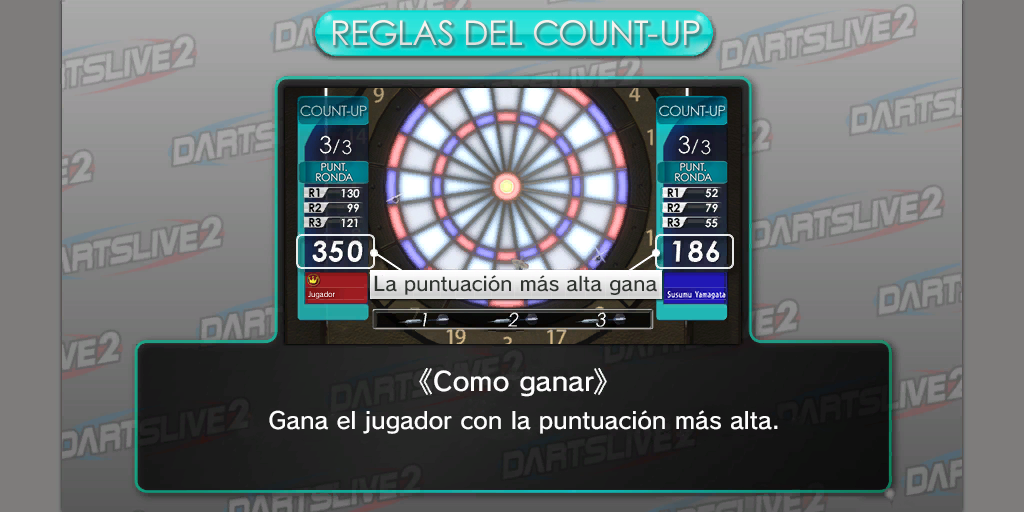
<style>
.page{position:relative;width:1024px;height:512px}
.page>*{position:absolute;margin:0}
.t1{font:34px "CenturyGothicPaneuropean";color:#eae9e6}
.t2{font:19.5px "SCEPS3RodinLATIN-Regular";color:#313531}
.t3{font:25.9px "SCEPS3RodinLATIN-Regular";color:#fdfdfd;scale:1.04 1}
.t4{font:23px "SCEPS3RodinLATIN-Regular";color:#fdfdfd}
</style>
<div class="page">
<p class="t1" style="left:333px;top:20px;width:367px;height:26px">REGLAS DEL COUNT-UP</p>
<p class="t2" style="left:374px;top:275px;width:283px;height:20px">La puntuación más alta gana</p>
<p class="t3" style="left:434px;top:370px;width:160px;height:27px">Como ganar</p>
<p class="t4" style="left:269px;top:410px;width:509px;height:24px">Gana el jugador con la puntuación más alta.</p>
</div>
